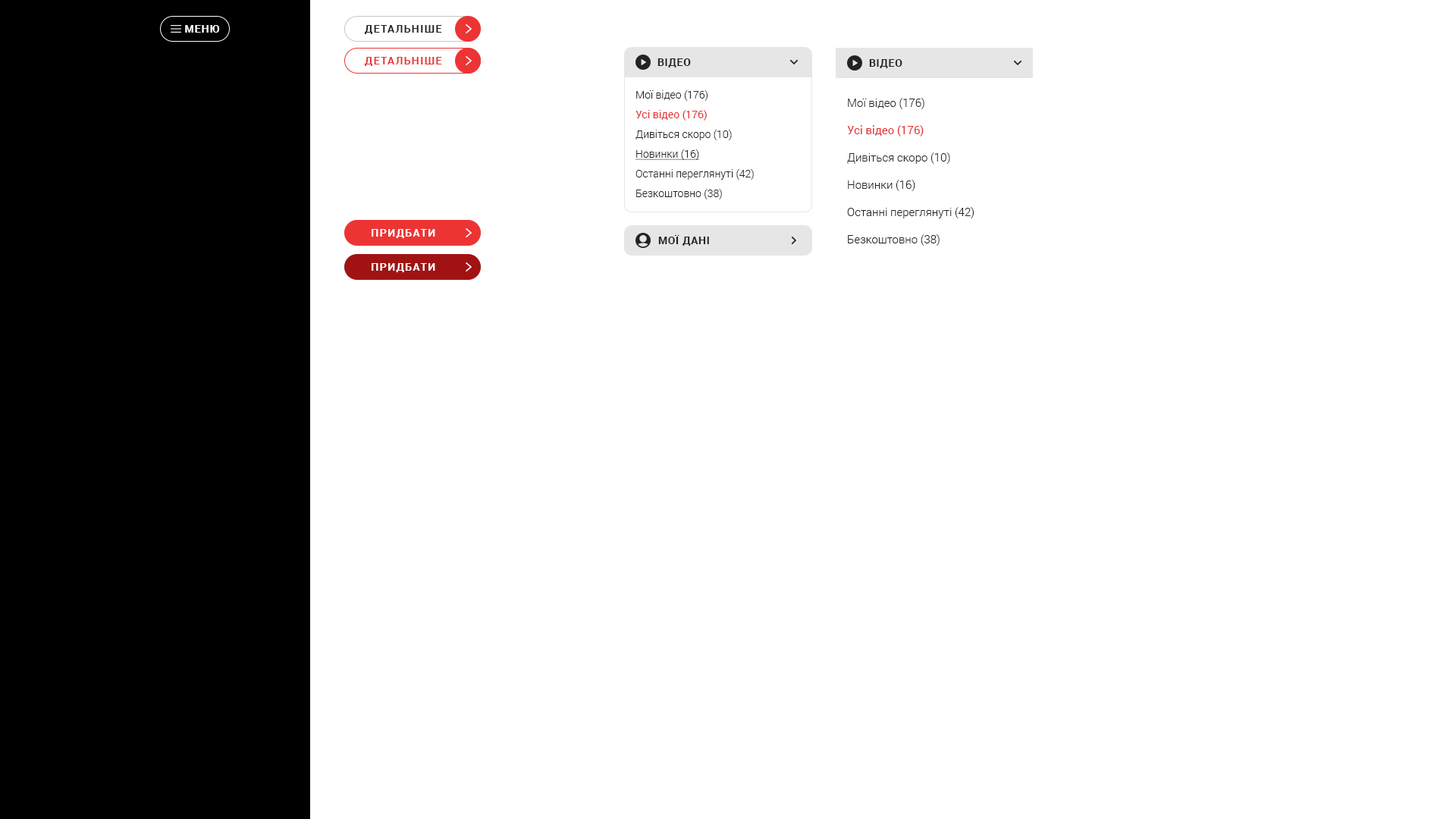
<style>
.page{position:relative;width:1456px;height:819px;background:#ffffff}
.page>*{position:absolute;margin:0}
.t1{font:10.6px "Roboto-Bold";letter-spacing:0.075em;color:#ffffff;text-transform:uppercase}
.t2{font:10.6px "Roboto-Bold";letter-spacing:0.1em;color:#232323;text-transform:uppercase}
.t3{font:10.6px "Roboto-Bold";letter-spacing:0.1em;color:#ed3434;text-transform:uppercase}
.t4{font:10.6px "Roboto-Bold";letter-spacing:0.05em;color:#232323;text-transform:uppercase}
.t5{font:10.6px/19.7px "Roboto-Light";color:#232323}
.t6{font:10.6px/19.7px "Roboto-Regular";color:#e63333}
.t7{font:10.6px/19.7px "Roboto-Light";color:#232323;text-decoration:underline}
.t8{font:11.4px/27.3px "Roboto-Light";color:#232323}
.t9{font:11.4px/27.3px "Roboto-Regular";color:#e63333}
.t10{font:10.6px "Roboto-Bold";letter-spacing:0.1em;color:#ffffff;text-transform:uppercase}
</style>
<div class="page">
<p class="t1" style="left:185px;top:25px;width:35px;height:8px">МЕНю</p>
<p class="t2" style="left:364px;top:25px;width:78px;height:9px">Детальніше</p>
<p class="t3" style="left:364px;top:57px;width:78px;height:9px">Детальніше</p>
<p class="t4" style="left:657px;top:58px;width:34px;height:9px">ВІДЕО</p>
<p class="t4" style="left:869px;top:59px;width:33px;height:9px">ВІДЕО</p>
<p class="t5" style="left:635px;top:90px;width:119px;height:109px">Мої відео (176)<br><span class="t6">Усі відео (176)<br></span>Дивіться скоро (10)<br><span class="t7">Новинки (16)<br></span>Останні переглянуті (42)<br>Безкоштовно (38)</p>
<p class="t8" style="left:847px;top:98px;width:127px;height:148px">Мої відео (176)<br><span class="t9">Усі відео (176)<br></span>Дивіться скоро (10)<br>Новинки (16)<br>Останні переглянуті (42)<br>Безкоштовно (38)</p>
<p class="t10" style="left:372px;top:229px;width:63px;height:9px">придбати</p>
<p class="t4" style="left:658px;top:235px;width:51px;height:11px">Мої дані</p>
<p class="t10" style="left:372px;top:263px;width:63px;height:9px">придбати</p>
</div>
